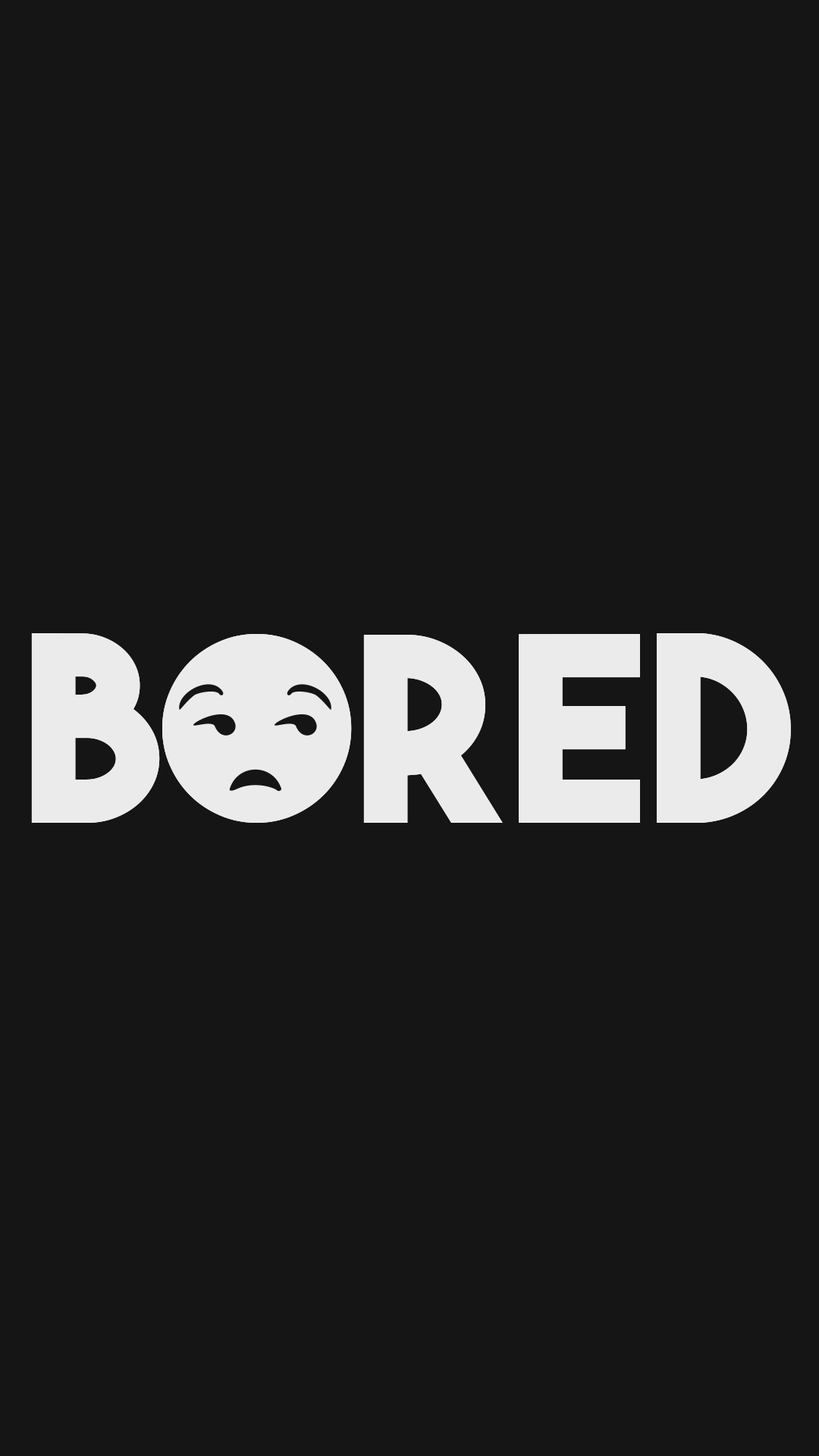
<style>
.page{position:relative;width:819px;height:1456px;background:#151515}
.page>*{position:absolute;margin:0}
.t1{font:257.1px "TheBoldFont";color:#ebebeb}
</style>
<div class="page">
<p class="t1" style="left:31px;top:633px;width:760px;height:190px">BORED</p>
</div>
